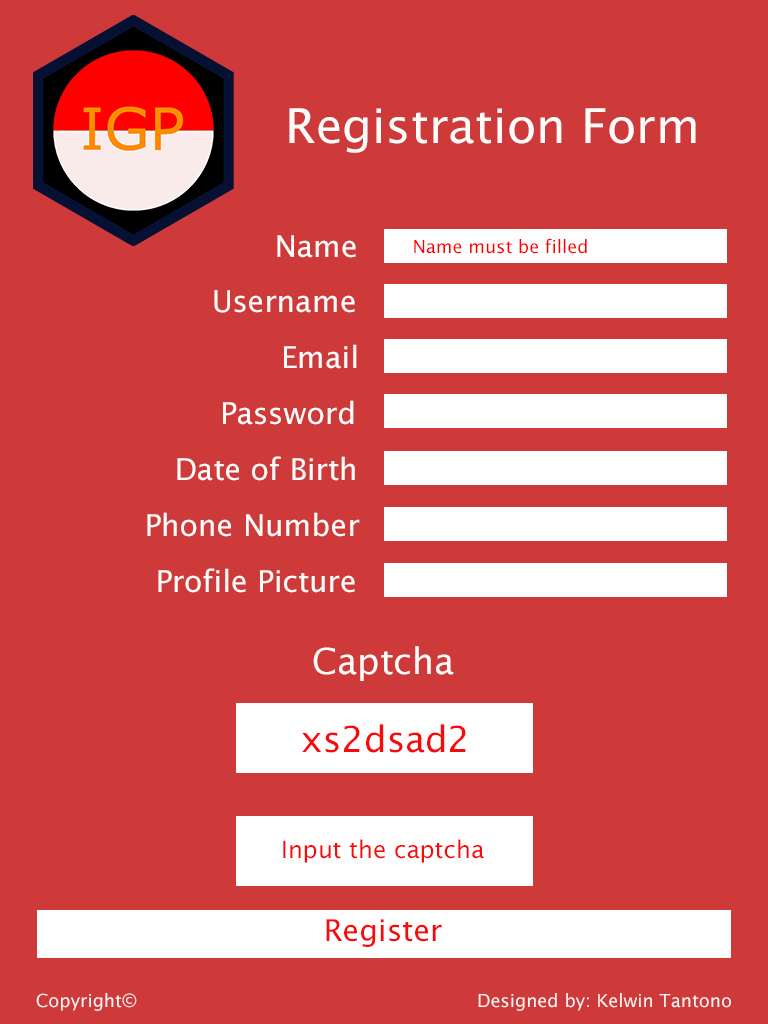
<style>
.page{position:relative;width:768px;height:1024px;background:#ce3a3a}
.page>*{position:absolute;margin:0}
.t1{font:48px "LucidaSans";color:#fefbfb}
.t2{font:30px "LucidaSans";color:#fefbfb}
.t3{font:18px "LucidaSans";color:#ff0000}
.t4{font:36px "LucidaSans";color:#fefbfb}
.t5{font:36px "LucidaSans";color:#f70a0a}
.t6{font:24px "LucidaSans";color:#f70a0a}
.t7{font:30px "LucidaSans";color:#f70a0a}
.t8{font:18px "LucidaSans";color:#fcf4f4}
</style>
<div class="page">
<p class="t1" style="left:289px;top:108px;width:407px;height:45px">Registration Form</p>
<p class="t2" style="left:277px;top:235px;width:79px;height:23px">Name</p>
<p class="t3" style="left:414px;top:238px;width:173px;height:16px">Name must be filled</p>
<p class="t2" style="left:214px;top:290px;width:141px;height:23px">Username</p>
<p class="t2" style="left:284px;top:344px;width:73px;height:25px">Email</p>
<p class="t2" style="left:223px;top:400px;width:131px;height:25px">Password</p>
<p class="t2" style="left:177px;top:456px;width:178px;height:25px">Date of Birth</p>
<p class="t2" style="left:147px;top:512px;width:213px;height:25px">Phone Number</p>
<p class="t2" style="left:158px;top:568px;width:197px;height:25px">Profile Picture</p>
<p class="t4" style="left:313px;top:646px;width:141px;height:35px">Captcha</p>
<p class="t5" style="left:302px;top:724px;width:164px;height:29px">xs2dsad2</p>
<p class="t6" style="left:283px;top:839px;width:201px;height:24px">Input the captcha</p>
<p class="t7" style="left:326px;top:919px;width:116px;height:28px">Register</p>
<p class="t8" style="left:36px;top:993px;width:101px;height:18px">Copyright©</p>
<p class="t8" style="left:478px;top:993px;width:253px;height:18px">Designed by: Kelwin Tantono</p>
</div>
